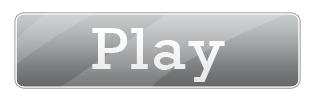
<style>
.page{position:relative;width:320px;height:100px;background:#ffffff}
.page>*{position:absolute;margin:0}
.t1{font:59.6px "Rockwell";letter-spacing:0.02em;color:#f5f5f5;scale:1.12 1}
</style>
<div class="page">
<p class="t1" style="left:92px;top:28px;width:133px;height:54px">Play</p>
</div>
